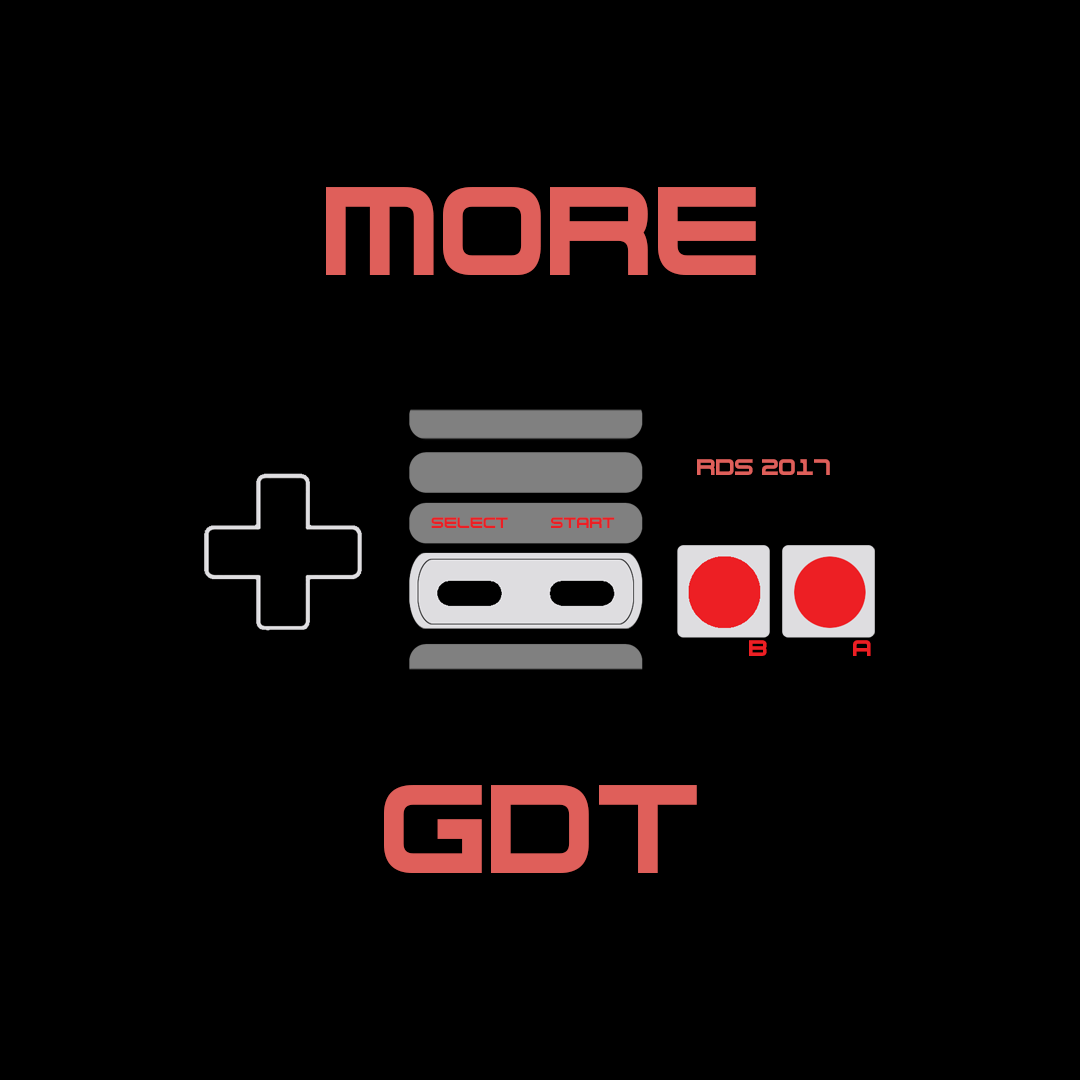
<style>
.page{position:relative;width:1080px;height:1080px;background:#000000}
.page>*{position:absolute;margin:0}
.t1{font:200px "NesController";color:#df5f5a}
.t2{font:36px "NesController";color:#df5f5a}
</style>
<div class="page">
<p class="t1" style="left:326px;top:187px;width:430px;height:88px">More</p>
<p class="t2" style="left:697px;top:459px;width:133px;height:16px">RDS 2017</p>
<p class="t1" style="left:384px;top:785px;width:313px;height:88px">GDT</p>
</div>
